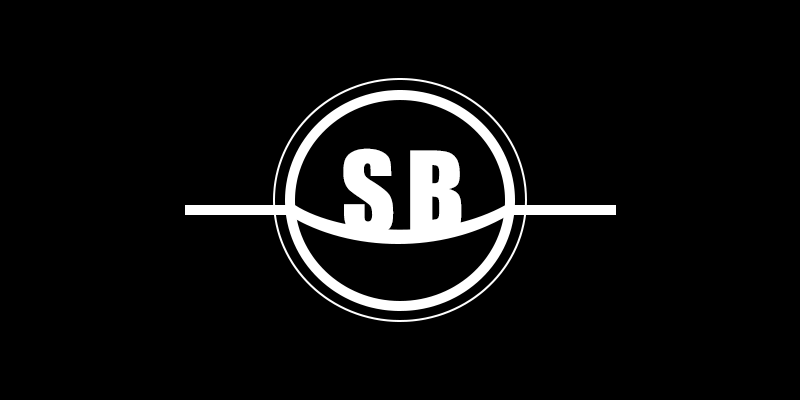
<style>
.page{position:relative;width:800px;height:400px;background:#000000}
.page>*{position:absolute;margin:0}
.t1{font:105.8px "Impact";letter-spacing:0.1em;color:#ffffff}
</style>
<div class="page">
<p class="t1" style="left:343px;top:148px;width:119px;height:88px">SB</p>
</div>
